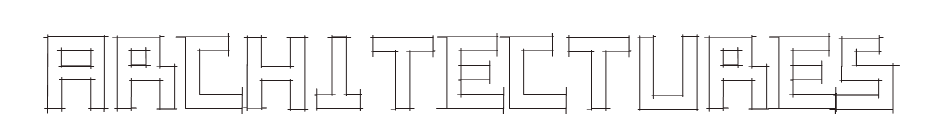
<style>
.page{position:relative;width:937px;height:132px;background:#ffffff}
.page>*{position:absolute;margin:0}
.t1{font:72px "SketchiquaA";color:#241c1c}
</style>
<div class="page">
<p class="t1" style="left:43px;top:33px;width:857px;height:81px">Architectures University</p>
</div>
